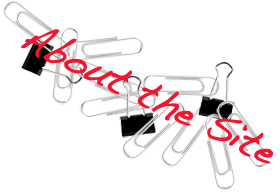
<style>
.page{position:relative;width:280px;height:194px;background:#ffffff}
.page>*{position:absolute;margin:0}
.t1{font:39.6px "Handwriting-Dakota";letter-spacing:-0.01em;color:#f2152f;font-weight:bold;scale:0.91 1}
</style>
<div class="page">
<p class="t1" style="left:21px;top:29px;width:252px;height:135px;rotate:25deg">About the Site</p>
</div>
